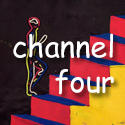
<style>
.page{position:relative;width:125px;height:125px}
.page>*{position:absolute;margin:0}
.t1{font:29.4px "ComicSansMS";color:#ffffff}
</style>
<div class="page">
<p class="t1" style="left:13px;top:33px;width:101px;height:62px;text-align:right">channel<br>four</p>
</div>
